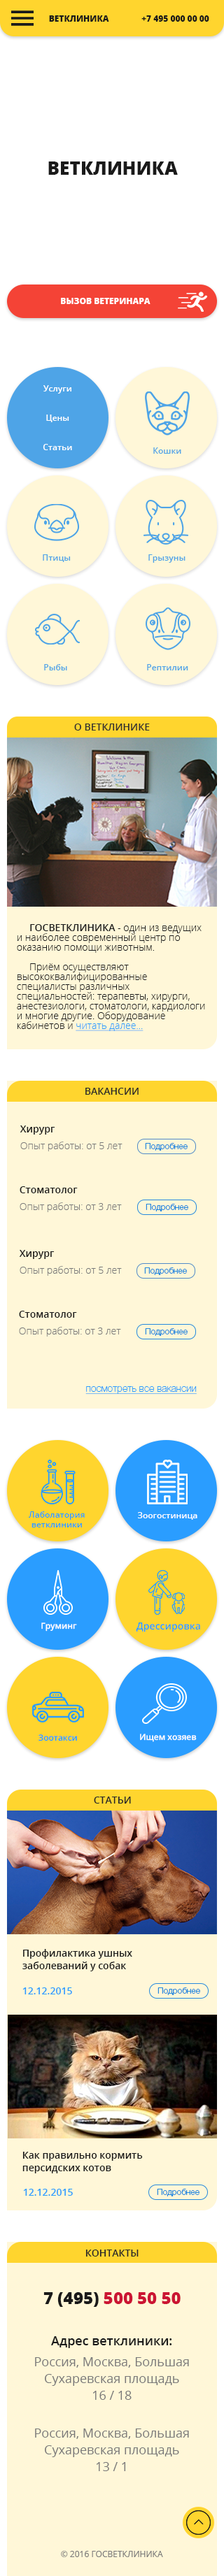
<style>
.page{position:relative;width:224px;height:2576px;background:#ffffff}
.page>*{position:absolute;margin:0}
.t1{font:8.4px "OpenSans-Extrabold";color:#1a1a1a}
.t2{font:18.2px "OpenSans-Extrabold";color:#1a1a1a}
.t3{font:8.4px "OpenSans-Extrabold";color:#ffffff}
.t4{font:8.4px/29.4px "OpenSans-Semibold";color:#ffffff}
.t5{font:8.4px "OpenSans-Semibold";color:#4ea4e7}
.t6{font:9.8px "OpenSans-Semibold";color:#303030}
.t7{font:9.8px/9.8px "OpenSans-Light";color:#1a1a1a}
.t8{font:9.8px/9.8px "OpenSans-Semibold";color:#1a1a1a}
.t9{font:9.8px/9.8px "OpenSans-Light";color:#2a9dff;text-decoration:underline}
.t10{font:9.8px "OpenSans-Semibold";color:#292929}
.t11{font:9.8px/16.8px "OpenSans-Light";color:#797979}
.t12{font:9.8px/16.8px "OpenSans-Semibold";color:#1a1a1a}
.t13{font:8.4px "HelveticaNeueCyr-Light";color:#2589de}
.t14{font:9.8px "HelveticaNeueCyr-Thin";color:#2a9dff;text-decoration:underline}
.t15{font:8.4px/9.8px "OpenSans-Semibold";color:#2a9dff}
.t16{font:8.4px "OpenSans-Semibold";color:#ffffff}
.t17{font:9.8px "OpenSans-Semibold";color:#2a9dff}
.t18{font:8.4px "OpenSans-Semibold";color:#2a9dff}
.t19{font:9.8px/12.6px "OpenSans-Semibold";color:#1a1a1a}
.t20{font:16.8px "OpenSans-Extrabold";color:#cb1533}
.t21{font:16.8px "OpenSans-Extrabold";color:#1a1a1a}
.t22{font:12.6px/16.8px "OpenSans";color:#797979}
.t23{font:12.6px/15.4px "OpenSans-Semibold";color:#1a1a1a}
.t24{font:12.6px/21px "OpenSans";color:#797979}
.t25{font:8.4px "OpenSans";color:#797979}
</style>
<div class="page">
<p class="t1" style="left:49px;top:15px;width:160px;height:7px">ВЕТКЛИНИКА               +7 495 000 00 00</p>
<p class="t2" style="left:48px;top:161px;width:130px;height:14px">ВЕТКЛИНИКА</p>
<p class="t3" style="left:61px;top:298px;width:89px;height:6px">ВЫЗОВ ВЕТЕРИНАРА</p>
<p class="t4" style="left:43px;top:385px;width:29px;height:65px;text-align:center">Услуги<br>Цены<br>Статьи</p>
<p class="t5" style="left:153px;top:447px;width:28px;height:7px">Кошки</p>
<p class="t5" style="left:43px;top:554px;width:28px;height:8px">Птицы</p>
<p class="t5" style="left:148px;top:554px;width:37px;height:9px">Грызуны</p>
<p class="t5" style="left:44px;top:664px;width:23px;height:6px">Рыбы</p>
<p class="t5" style="left:147px;top:664px;width:41px;height:6px">Рептилии</p>
<p class="t6" style="left:74px;top:724px;width:76px;height:7px">О ВЕТКЛИНИКЕ</p>
<p class="t7" style="left:17px;top:924px;width:188px;height:107px"><span class="t8">ГОСВЕТКЛИНИКА</span> - один из ведущих и наиболее современный центр по оказанию помощи животным.<br>     <br>     Приём осуществляют высококвалифицированные специалисты различных специальностей: терапевты, хирурги, анестезиологи, стоматологи, кардиологи и многие другие. Оборудование кабинетов и <span class="t9">читать далее...</span> <br><br>ер, эндоскоп, рентгенографическая система вовсе не являются "экзотикой"Диагностика прово-<br>дится только на самом современном и совершенном оборудовании отечественных и иностран-<br>ных производителей.</p>
<p class="t10" style="left:85px;top:1088px;width:53px;height:7px">ВАКАНСИИ</p>
<p class="t11" style="left:20px;top:1125px;width:102px;height:26px"><span class="t12">Хирург<br></span>Опыт работы: от 5 лет</p>
<p class="t13" style="left:145px;top:1143px;width:42px;height:8px">Подробнее</p>
<p class="t11" style="left:20px;top:1186px;width:102px;height:26px"><span class="t12">Стоматолог<br></span>Опыт работы: от 3 лет</p>
<p class="t13" style="left:145px;top:1204px;width:43px;height:7px">Подробнее</p>
<p class="t11" style="left:19px;top:1250px;width:103px;height:26px"><span class="t12">Хирург<br></span>Опыт работы: от 5 лет</p>
<p class="t13" style="left:144px;top:1267px;width:43px;height:8px">Подробнее</p>
<p class="t11" style="left:19px;top:1311px;width:102px;height:26px"><span class="t12">Стоматолог<br></span>Опыт работы: от 3 лет</p>
<p class="t13" style="left:145px;top:1328px;width:42px;height:8px">Подробнее</p>
<p class="t14" style="left:85px;top:1386px;width:111px;height:9px">посмотреть все вакансии</p>
<p class="t15" style="left:28px;top:1511px;width:57px;height:16px;text-align:center">Лаболатория<br>ветклиники</p>
<p class="t16" style="left:138px;top:1512px;width:59px;height:8px">Зоогостиница</p>
<p class="t16" style="left:41px;top:1622px;width:36px;height:10px">Груминг</p>
<p class="t17" style="left:136px;top:1622px;width:64px;height:10px">Дрессировка</p>
<p class="t16" style="left:140px;top:1734px;width:56px;height:8px">Ищем хозяев</p>
<p class="t18" style="left:38px;top:1734px;width:39px;height:7px">Зоотакси</p>
<p class="t10" style="left:94px;top:1797px;width:37px;height:7px">СТАТЬИ</p>
<p class="t19" style="left:22px;top:1949px;width:110px;height:22px">Профилактика ушных <br>заболеваний у собак</p>
<p class="t17" style="left:22px;top:1987px;width:50px;height:7px">12.12.2015</p>
<p class="t13" style="left:157px;top:1987px;width:43px;height:8px">Подробнее</p>
<p class="t19" style="left:22px;top:2152px;width:121px;height:21px">Как правильно кормить <br>персидских котов</p>
<p class="t17" style="left:23px;top:2189px;width:50px;height:7px">12.12.2015</p>
<p class="t13" style="left:157px;top:2189px;width:42px;height:7px">Подробнее</p>
<p class="t10" style="left:85px;top:2250px;width:53px;height:7px">КОНТАКТЫ</p>
<p class="t20" style="left:43px;top:2292px;width:137px;height:15px"><span class="t21">7 (495) </span>500 50 50</p>
<p class="t22" style="left:35px;top:2336px;width:154px;height:135px;text-align:center"><span class="t23">Адрес ветклиники:<br></span><span class="t24">Россия, Москва, Большая<br></span>Сухаревская площадь<br>16 / 18<br><br><span class="t24">Россия, Москва, Большая<br></span>Сухаревская площадь<br>13 / 1</p>
<p class="t25" style="left:61px;top:2551px;width:102px;height:6px">© 2016 ГОСВЕТКЛИНИКА</p>
</div>
